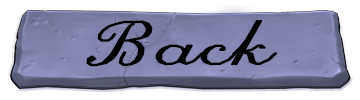
<style>
.page{position:relative;width:360px;height:100px;background:#ffffff}
.page>*{position:absolute;margin:0}
.t1{font:69px "SWScrpc";letter-spacing:-0.02em;color:#000000;font-style:italic;scale:1.44 1}
</style>
<div class="page">
<p class="t1" style="left:86px;top:19px;width:192px;height:48px;rotate:-1deg">Back</p>
</div>
